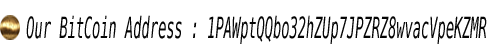
<style>
.page{position:relative;width:500px;height:50px;background:#ffffff}
.page>*{position:absolute;margin:0}
.t1{font:29.2px "BitstreamVeraSansMono-Oblique";color:#050505;scale:0.47 1}
</style>
<div class="page">
<p class="t1" style="left:26px;top:15px;width:461px;height:29px">Our BitCoin Address : 1PAWptQQbo32hZUp7JPZRZ8wvacVpeKZMR</p>
</div>
